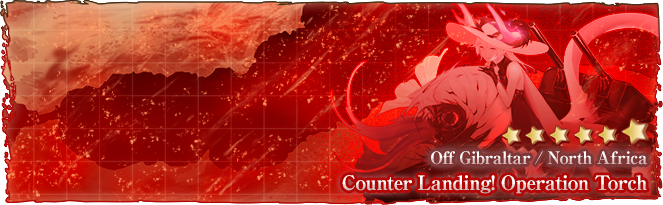
<style>
.page{position:relative;width:663px;height:205px}
.page>*{position:absolute;margin:0}
.t1{font:17px "RyuminPro-ExBold";letter-spacing:-0.04em}
.t2{font:20px "RyuminPro-ExBold";letter-spacing:-0.04em}
</style>
<div class="page">
<p class="t1" style="left:431px;top:151px;width:217px;height:14px">Off Gibraltar / North Africa</p>
<p class="t2" style="left:342px;top:175px;width:305px;height:19px">Counter Landing! Operation Torch</p>
</div>
